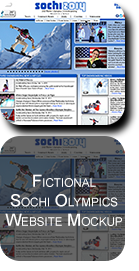
<style>
.page{position:relative;width:139px;height:271px}
.page>*{position:absolute;margin:0}
.t1{font:16.7px/19.4px "ArialMT";color:#ffffff;font-variant:small-caps}
</style>
<div class="page">
<p class="t1" style="left:5px;top:174px;width:117px;height:52px;text-align:center">Fictional <br>Sochi Olympics Website Mockup</p>
</div>
